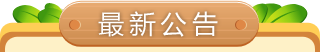
<style>
.page{position:relative;width:320px;height:52px}
.page>*{position:absolute;margin:0}
.t1{font:26px "MicrosoftYaHei";letter-spacing:0.2em;color:#ffffff;font-variant:small-caps}
</style>
<div class="page">
<p class="t1" style="left:98px;top:11px;width:120px;height:26px">最新公告</p>
</div>
